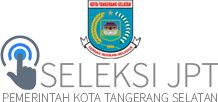
<style>
.page{position:relative;width:218px;height:102px;background:#ffffff}
.page>*{position:absolute;margin:0}
.t1{font:36px "SourceSansRoman-Light";color:#868686}
.t2{font:13px "SourceSansVariable-Roman";color:#868686}
</style>
<div class="page">
<p class="t1" style="left:40px;top:62px;width:179px;height:26px">SELEKSI JPT</p>
<p class="t2" style="left:3px;top:93px;width:214px;height:10px">PEMERINTAH KOTA TANGERANG SELATAN</p>
</div>
